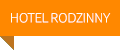
<style>
.page{position:relative;width:120px;height:50px;background:#ff8800}
.page>*{position:absolute;margin:0}
.t1{font:14px "TUITypeLight-Regular";color:#ffffff;text-transform:uppercase}
</style>
<div class="page">
<p class="t1" style="left:11px;top:13px;width:100px;height:10px">HOTEL rodzinny</p>
</div>
